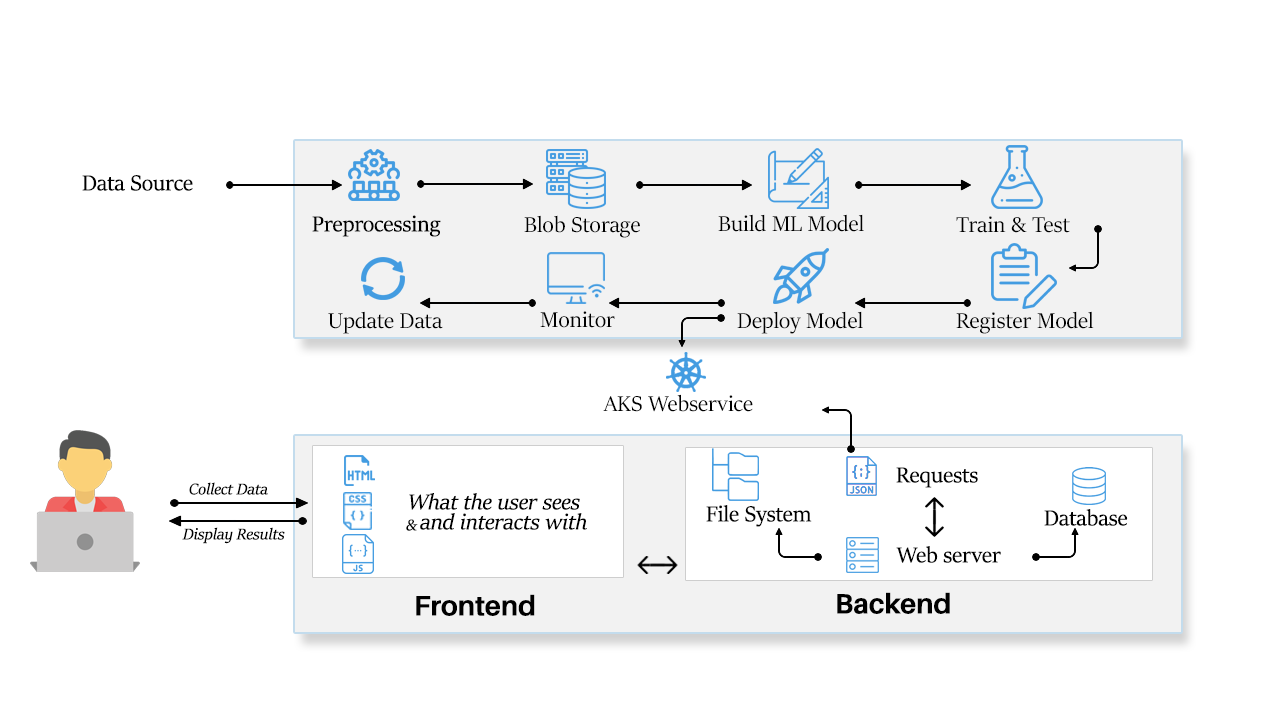
<style>
.page{position:relative;width:1280px;height:720px;background:#ffffff}
.page>*{position:absolute;margin:0}
.t1{font:24.3px "SitkaBanner";color:#000000}
.t2{font:17.4px "SitkaBanner-Italic";color:#000000}
.t3{font:24.3px "SitkaBanner-Italic";color:#000000}
.t4{font:27.8px "Aileron-Bold";color:#000000}
</style>
<div class="page">
<p class="t1" style="left:82px;top:175px;width:111px;height:16px">Data Source</p>
<p class="t1" style="left:312px;top:215px;width:129px;height:22px">Preprocessing</p>
<p class="t1" style="left:524px;top:215px;width:116px;height:23px">Blob Storage</p>
<p class="t1" style="left:718px;top:214px;width:146px;height:18px">Build ML Model</p>
<p class="t1" style="left:956px;top:216px;width:114px;height:17px">Train &amp; Test</p>
<p class="t1" style="left:328px;top:311px;width:115px;height:23px">Update Data</p>
<p class="t1" style="left:540px;top:311px;width:75px;height:17px">Monitor</p>
<p class="t1" style="left:737px;top:311px;width:126px;height:23px">Deploy Model</p>
<p class="t1" style="left:956px;top:311px;width:138px;height:23px">Register Model</p>
<p class="t1" style="left:603px;top:394px;width:150px;height:18px">AKS Webservice</p>
<p class="t1" style="left:896px;top:467px;width:82px;height:21px">Requests</p>
<p class="t2" style="left:189px;top:482px;width:79px;height:13px">Collect Data</p>
<p class="t3" style="left:409px;top:493px;width:171px;height:17px">What the user sees</p>
<p class="t1" style="left:706px;top:505px;width:106px;height:22px">File System</p>
<p class="t1" style="left:1044px;top:509px;width:84px;height:17px">Database</p>
<p class="t2" style="left:406px;top:519px;width:12px;height:12px">&amp;</p>
<p class="t3" style="left:420px;top:513px;width:167px;height:17px">and interacts with</p>
<p class="t2" style="left:182px;top:527px;width:103px;height:17px">Display Results</p>
<p class="t1" style="left:896px;top:546px;width:105px;height:17px">Web server</p>
<p class="t4" style="left:837px;top:592px;width:113px;height:22px">Backend</p>
<p class="t4" style="left:416px;top:594px;width:119px;height:22px">Frontend</p>
</div>
